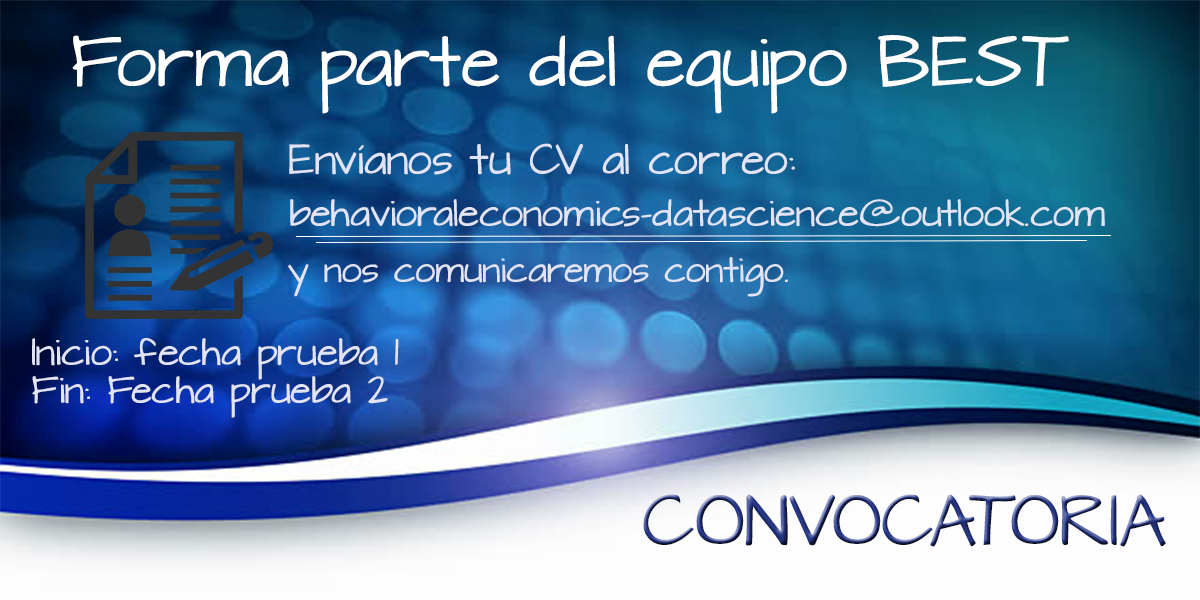
<style>
.page{position:relative;width:1200px;height:600px}
.page>*{position:absolute;margin:0}
.t1{font:60px "ArchitectsDaughter";color:#ffffff}
.t2{font:36px "ArchitectsDaughter";color:#e1e4f4}
.t3{font:32px "ArchitectsDaughter";color:#e1e4f4}
.t4{font:30px "ArchitectsDaughter";color:#e1e4f4}
.t5{font:60px "ArchitectsDaughter"}
</style>
<div class="page">
<p class="t1" style="left:72px;top:35px;width:997px;height:79px">Forma parte del equipo BEST</p>
<p class="t2" style="left:289px;top:143px;width:506px;height:32px">Envíanos tu CV al correo:</p>
<p class="t3" style="left:290px;top:199px;width:815px;height:28px">behavioraleconomics-datascience@outlook.com</p>
<p class="t4" style="left:288px;top:257px;width:500px;height:40px">y nos comunicaremos contigo.</p>
<p class="t3" style="left:32px;top:338px;width:367px;height:80px">Inicio: fecha prueba 1<br>Fin: Fecha prueba 2</p>
<p class="t5" style="left:643px;top:494px;width:523px;height:53px">CONVOCATORIA</p>
</div>
